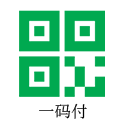
<style>
.page{position:relative;width:125px;height:125px;background:#ffffff}
.page>*{position:absolute;margin:0}
.t1{font:16px "NSimSun";color:#020202;scale:1.03 1}
</style>
<div class="page">
<p class="t1" style="left:39px;top:103px;width:48px;height:16px">一码付</p>
</div>
